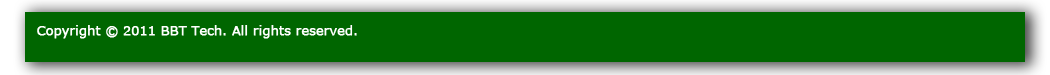
<style>
.page{position:relative;width:1050px;height:75px;background:#006600}
.page>*{position:absolute;margin:0}
.t1{font:12.5px "Verdana";color:#ffffff;font-weight:bold}
</style>
<div class="page">
<p class="t1" style="left:37px;top:25px;width:320px;height:14px">Copyright © 2011 BBT Tech. All rights reserved.</p>
</div>
